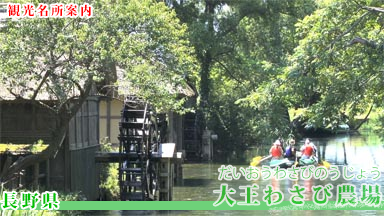
<style>
.page{position:relative;width:384px;height:216px}
.page>*{position:absolute;margin:0}
.t1{font:12px "KozMinPr6N-Heavy";letter-spacing:0.2em;color:#ff0000}
.t2{font:13.6px "KozGoPro-Light"}
.t3{font:21px "KozMinPr6N-Heavy";letter-spacing:0.16em;color:#3ebc3d}
.t4{font:17px "KozMinPr6N-Heavy";letter-spacing:0.2em;color:#00c000}
</style>
<div class="page">
<p class="t1" style="left:8px;top:4px;width:84px;height:13px">観光名所案内</p>
<p class="t2" style="left:219px;top:166px;width:161px;height:13px">だいおうわさびのうじょう</p>
<p class="t3" style="left:214px;top:184px;width:167px;height:22px">大王わさび農場</p>
<p class="t4" style="left:1px;top:192px;width:58px;height:17px">長野県</p>
</div>
